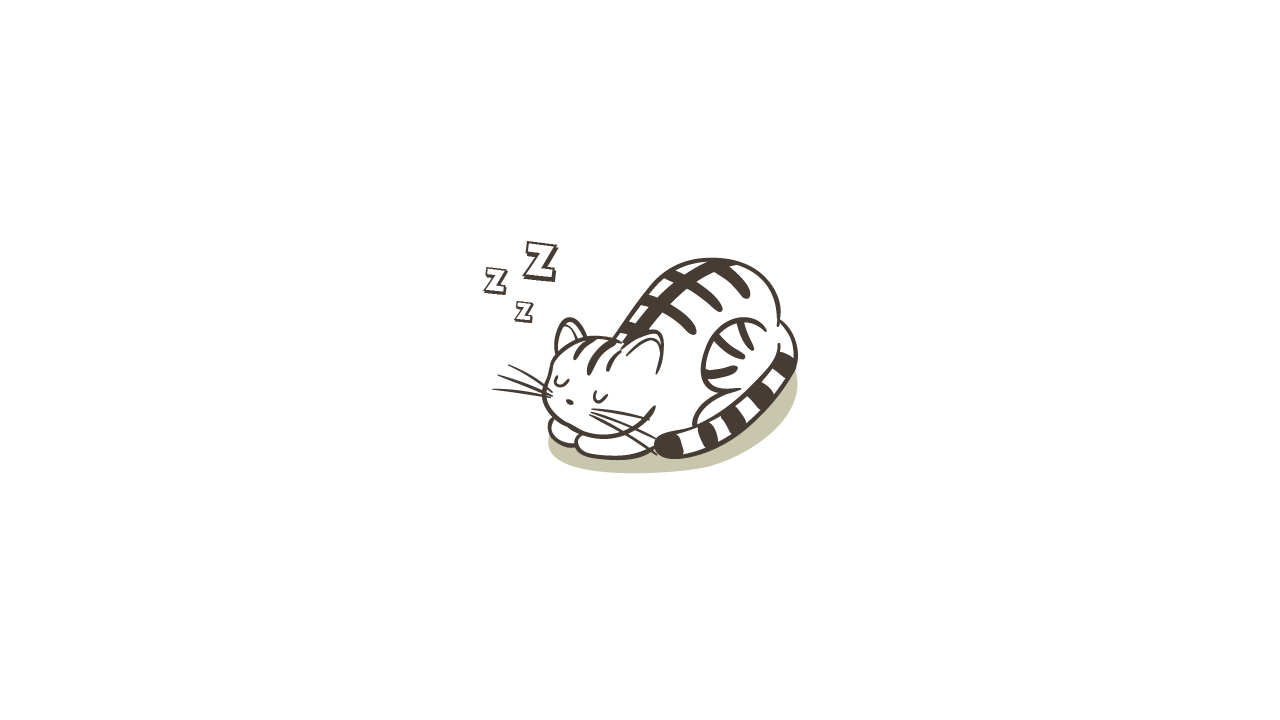
<style>
.page{position:relative;width:1280px;height:720px;background:#ffffff}
.page>*{position:absolute;margin:0}
.t1{font:50.9px "Mickey";color:#463c34;text-transform:uppercase}
.t2{font:34.9px "Mickey";color:#463c34;text-transform:uppercase}
.t3{font:27.6px "Mickey";color:#463c34;text-transform:uppercase}
</style>
<div class="page">
<p class="t1" style="left:522px;top:241px;width:37px;height:41px">Z</p>
<p class="t2" style="left:483px;top:267px;width:26px;height:28px">Z</p>
<p class="t3" style="left:513px;top:301px;width:21px;height:22px">Z</p>
</div>
